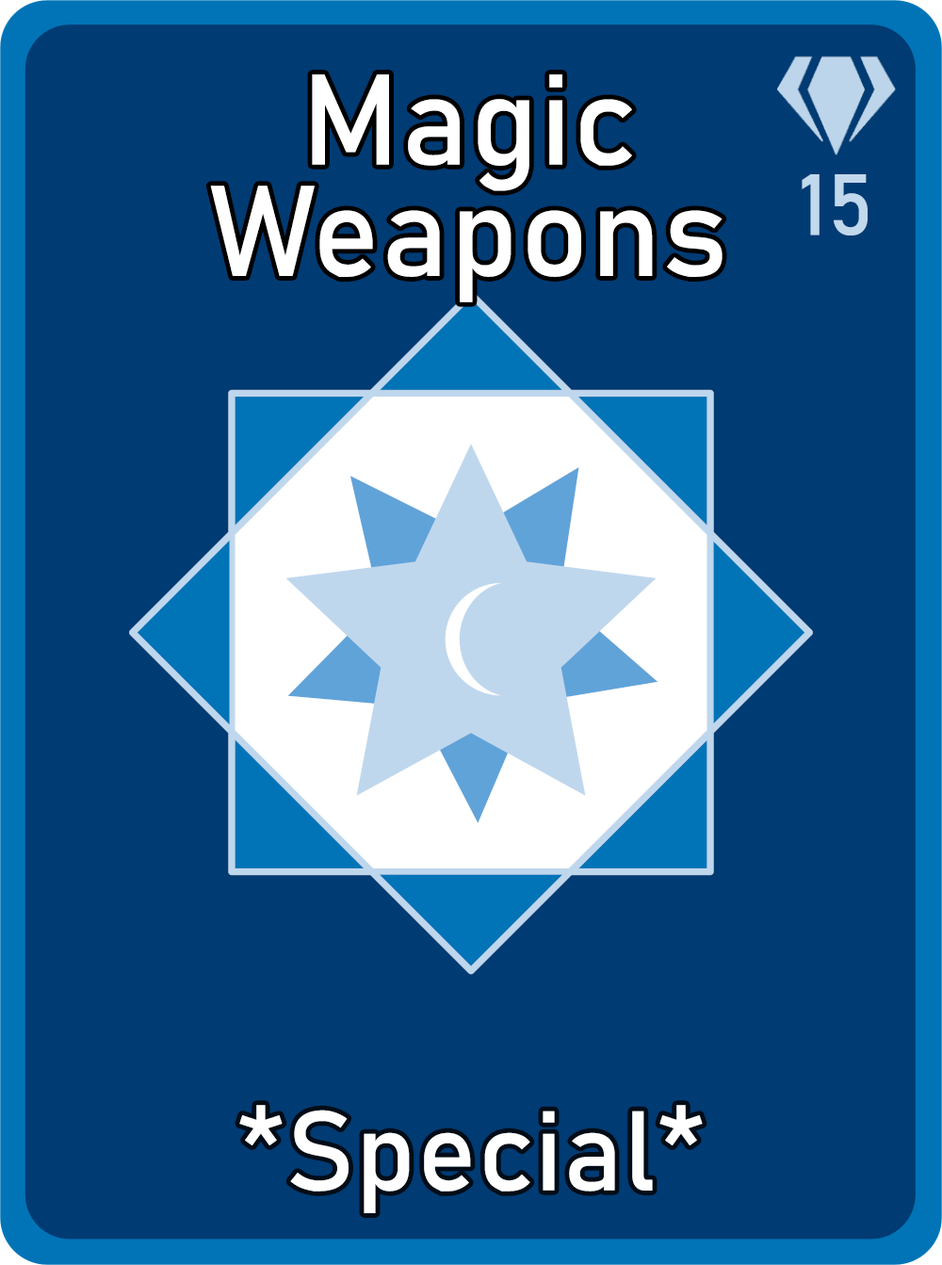
<style>
.page{position:relative;width:942px;height:1265px;background:#003b73}
.page>*{position:absolute;margin:0}
.t1{font:126.7px/111.3px "Bahnschrift";letter-spacing:0.01em;color:#ffffff}
.t2{font:85px "Bahnschrift";letter-spacing:0.01em;color:#c1d8ed}
.t3{font:111.3px "Bahnschrift";letter-spacing:0.01em;color:#ffffff}
</style>
<div class="page">
<p class="t1" style="left:210px;top:74px;width:513px;height:228px;text-align:center">Magic<br>Weapons</p>
<p class="t2" style="left:802px;top:174px;width:66px;height:62px">15</p>
<p class="t3" style="left:239px;top:1105px;width:464px;height:109px">*Special*</p>
</div>
